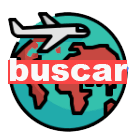
<style>
.page{position:relative;width:132px;height:135px;background:#ffffff}
.page>*{position:absolute;margin:0}
.t1{font:32px "Arial-Black";color:#f9f9fa}
</style>
<div class="page">
<p class="t1" style="left:10px;top:58px;width:118px;height:23px">buscar</p>
</div>
